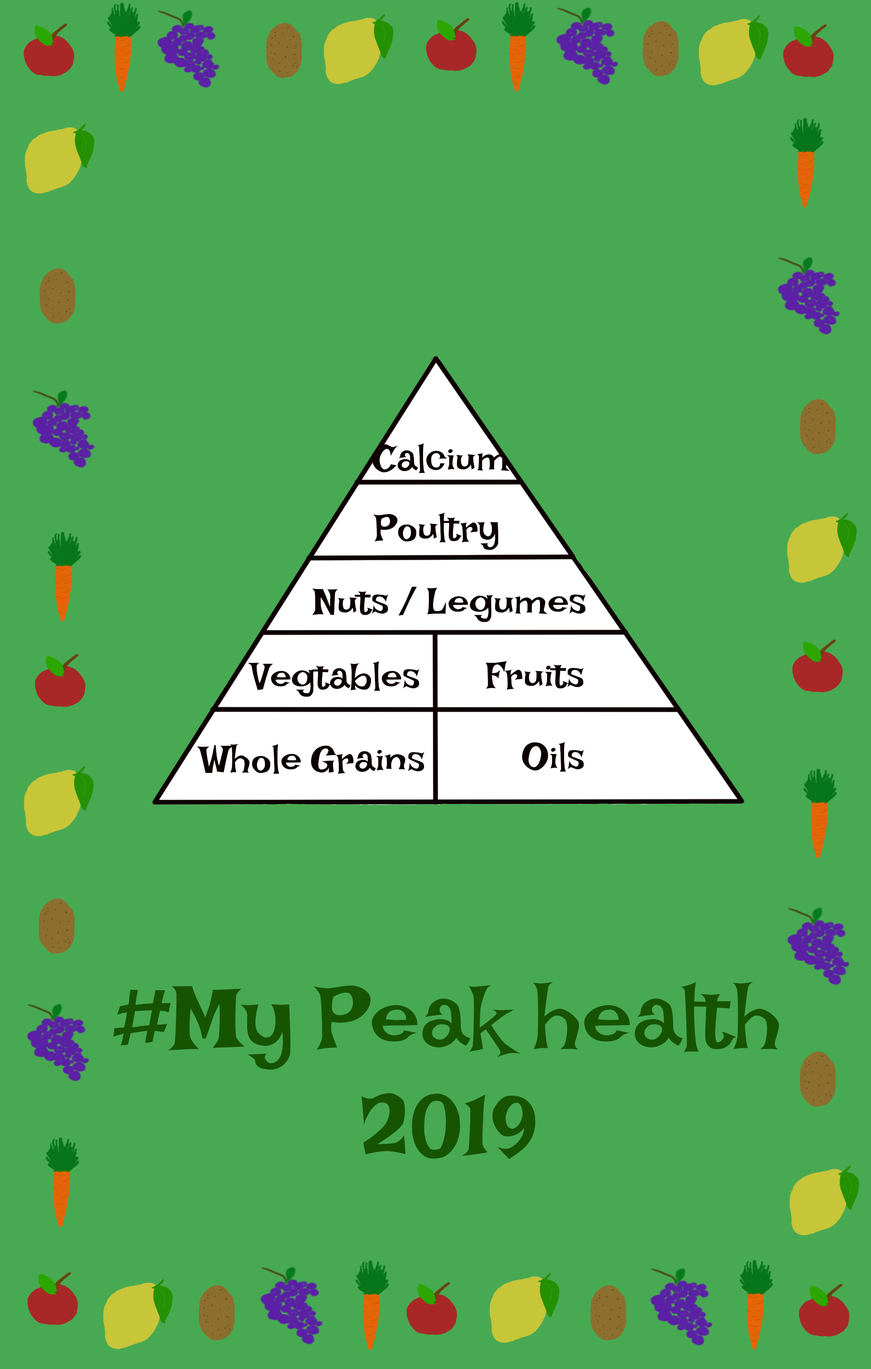
<style>
.page{position:relative;width:871px;height:1369px;background:#48a953}
.page>*{position:absolute;margin:0}
.t1{font:38.7px "LakkiReddy";color:#0d0101}
.t2{font:90.6px "LakkiReddy";color:#165402}
</style>
<div class="page">
<p class="t1" style="left:373px;top:443px;width:137px;height:30px">Calcium</p>
<p class="t1" style="left:373px;top:512px;width:126px;height:38px">Poultry</p>
<p class="t1" style="left:312px;top:587px;width:274px;height:35px">Nuts / Legumes</p>
<p class="t1" style="left:248px;top:661px;width:172px;height:36px">Vegtables</p>
<p class="t1" style="left:485px;top:661px;width:99px;height:29px">Fruits</p>
<p class="t1" style="left:197px;top:744px;width:228px;height:30px">Whole Grains</p>
<p class="t1" style="left:522px;top:742px;width:62px;height:30px">Oils</p>
<p class="t2" style="left:113px;top:981px;width:666px;height:178px;text-align:center">#My Peak health<br>2019</p>
</div>
